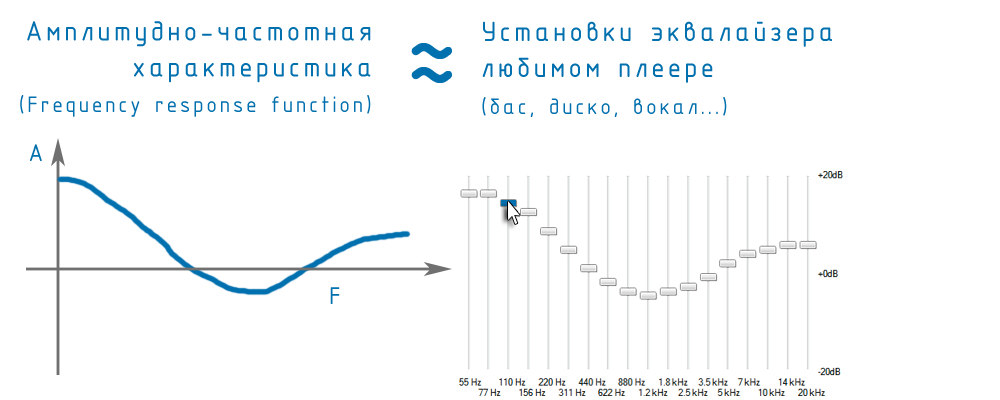
<style>
.page{position:relative;width:1000px;height:400px;background:#ffffff}
.page>*{position:absolute;margin:0}
.t1{font:30px "ISOCPEUR";letter-spacing:0.1em;color:#0070af}
.t2{font:124px "ISOCPEUR";letter-spacing:0.1em;color:#0070af}
.t3{font:24px "ISOCPEUR";letter-spacing:0.1em;color:#0070af}
.t4{font:26px "ISOCPEUR";letter-spacing:0.1em;color:#0070af}
</style>
<div class="page">
<p class="t1" style="left:27px;top:21px;width:344px;height:62px;text-align:right">Амплитудно-частотная<br>характеристика</p>
<p class="t1" style="left:482px;top:21px;width:350px;height:62px">Установки эквалайзера<br>любимом плеере</p>
<p class="t2" style="left:411px;top:43px;width:41px;height:40px">≈</p>
<p class="t3" style="left:20px;top:95px;width:351px;height:22px">(Frequency response function)</p>
<p class="t3" style="left:482px;top:97px;width:245px;height:20px">(бас, диско, вокал...)</p>
<p class="t4" style="left:30px;top:144px;width:12px;height:17px">A</p>
<p class="t4" style="left:330px;top:287px;width:10px;height:17px">F</p>
</div>
